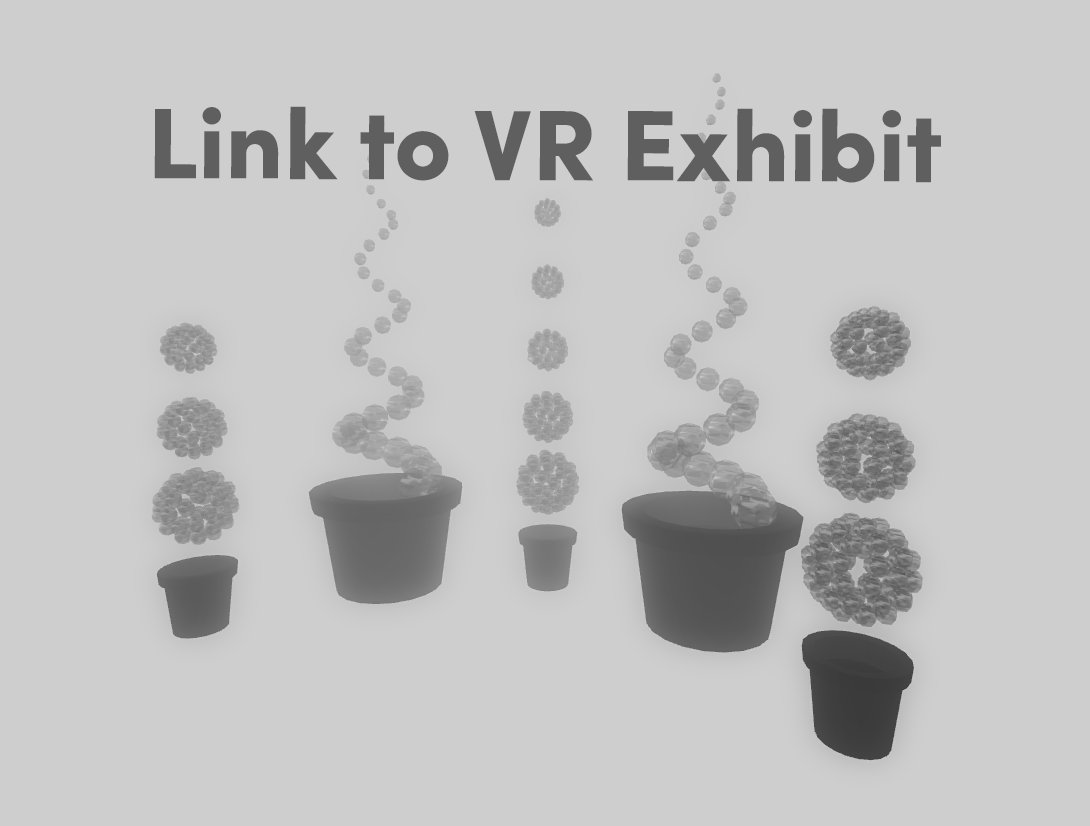
<style>
.page{position:relative;width:1090px;height:826px;background:#cecece}
.page>*{position:absolute;margin:0}
.t1{font:100px "SofiaPro-Black";color:#5f5f5f}
</style>
<div class="page">
<p class="t1" style="left:154px;top:106px;width:787px;height:77px">Link to VR Exhibit</p>
</div>
